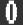
<style>
.page{position:relative;width:23px;height:25px;background:#333333}
.page>*{position:absolute;margin:0}
.t1{font:38.9px "VT323-Regular";color:#ffffff;font-weight:bold;scale:0.9 1}
</style>
<div class="page">
<p class="t1" style="left:5px;top:0px;width:12px;height:24px">0</p>
</div>
